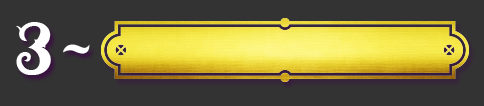
<style>
.page{position:relative;width:484px;height:106px;background:#333333}
.page>*{position:absolute;margin:0}
.t1{font:100px "Moyers";color:#ffffff}
</style>
<div class="page">
<p class="t1" style="left:16px;top:22px;width:35px;height:53px">3</p>
<p class="t1" style="left:63px;top:44px;width:27px;height:10px">~</p>
</div>
